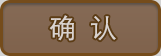
<style>
.page{position:relative;width:161px;height:56px}
.page>*{position:absolute;margin:0}
.t1{font:27px "STXihei";color:#dad3cf}
</style>
<div class="page">
<p class="t1" style="left:49px;top:15px;width:67px;height:26px">确  认</p>
</div>
